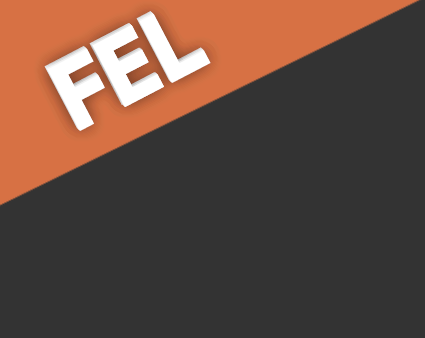
<style>
.page{position:relative;width:425px;height:338px;background:#333333}
.page>*{position:absolute;margin:0}
.t1{font:104.1px "KlavikaBold-Bold";letter-spacing:-0.03em;color:#ffffff}
</style>
<div class="page">
<p class="t1" style="left:44px;top:11px;width:164px;height:117px;rotate:-28deg">FEL</p>
<p class="t1" style="left:45px;top:12px;width:164px;height:117px;rotate:-28deg">FEL</p>
<p class="t1" style="left:45px;top:12px;width:164px;height:117px;rotate:-28deg">FEL</p>
<p class="t1" style="left:46px;top:13px;width:164px;height:117px;rotate:-28deg">FEL</p>
<p class="t1" style="left:46px;top:13px;width:164px;height:117px;rotate:-28deg">FEL</p>
<p class="t1" style="left:47px;top:14px;width:164px;height:117px;rotate:-28deg">FEL</p>
</div>
